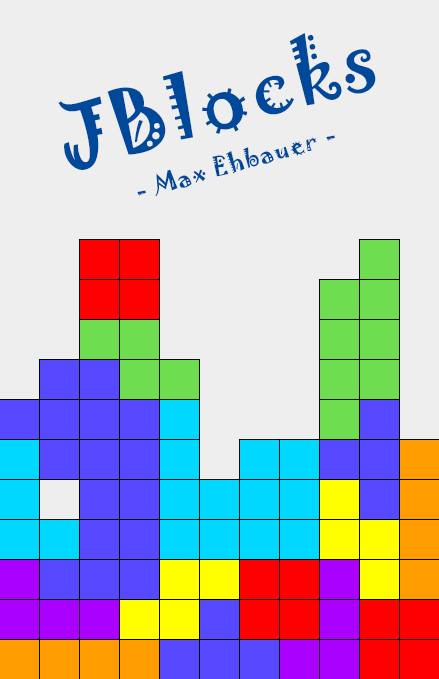
<style>
.page{position:relative;width:439px;height:679px;background:#eeeeee}
.page>*{position:absolute;margin:0}
.t1{font:24px "Jokerman-Regular";letter-spacing:0.05em;color:#004899}
.t2{font:80px "Jokerman-Regular";letter-spacing:0.05em;color:#004899}
</style>
<div class="page">
<p class="t1" style="left:58px;top:33px;width:318px;height:164px;text-align:center;rotate:-16deg"><span class="t2">JBlocks<br><br></span>- Max Ehbauer -</p>
</div>
